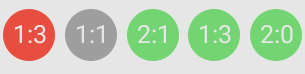
<style>
.page{position:relative;width:305px;height:74px;background:#e6e6e6}
.page>*{position:absolute;margin:0}
.t1{font:25px "Roboto-Regular";color:#e6e6e6}
</style>
<div class="page">
<p class="t1" style="left:15px;top:25px;width:31px;height:19px">1:3</p>
<p class="t1" style="left:77px;top:25px;width:27px;height:19px">1:1</p>
<p class="t1" style="left:138px;top:25px;width:28px;height:19px">2:1</p>
<p class="t1" style="left:200px;top:25px;width:31px;height:19px">1:3</p>
<p class="t1" style="left:261px;top:25px;width:32px;height:19px">2:0</p>
</div>
